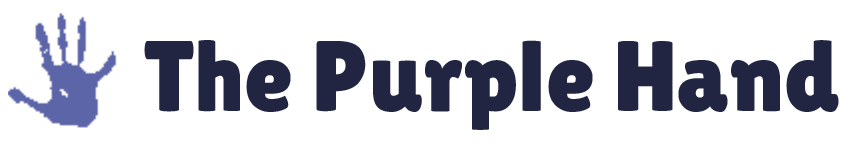
<style>
.page{position:relative;width:850px;height:148px;background:#ffffff}
.page>*{position:absolute;margin:0}
.t1{font:100px "LilitaOne";color:#212541}
</style>
<div class="page">
<p class="t1" style="left:144px;top:40px;width:695px;height:90px">The Purple Hand</p>
</div>
